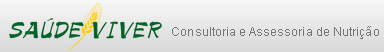
<style>
.page{position:relative;width:384px;height:52px}
.page>*{position:absolute;margin:0}
.t1{font:12px "ArialMT";letter-spacing:0.007em;color:#767676}
</style>
<div class="page">
<p class="t1" style="left:172px;top:26px;width:207px;height:13px">Consultoria e Assessoria de Nutrição</p>
</div>
